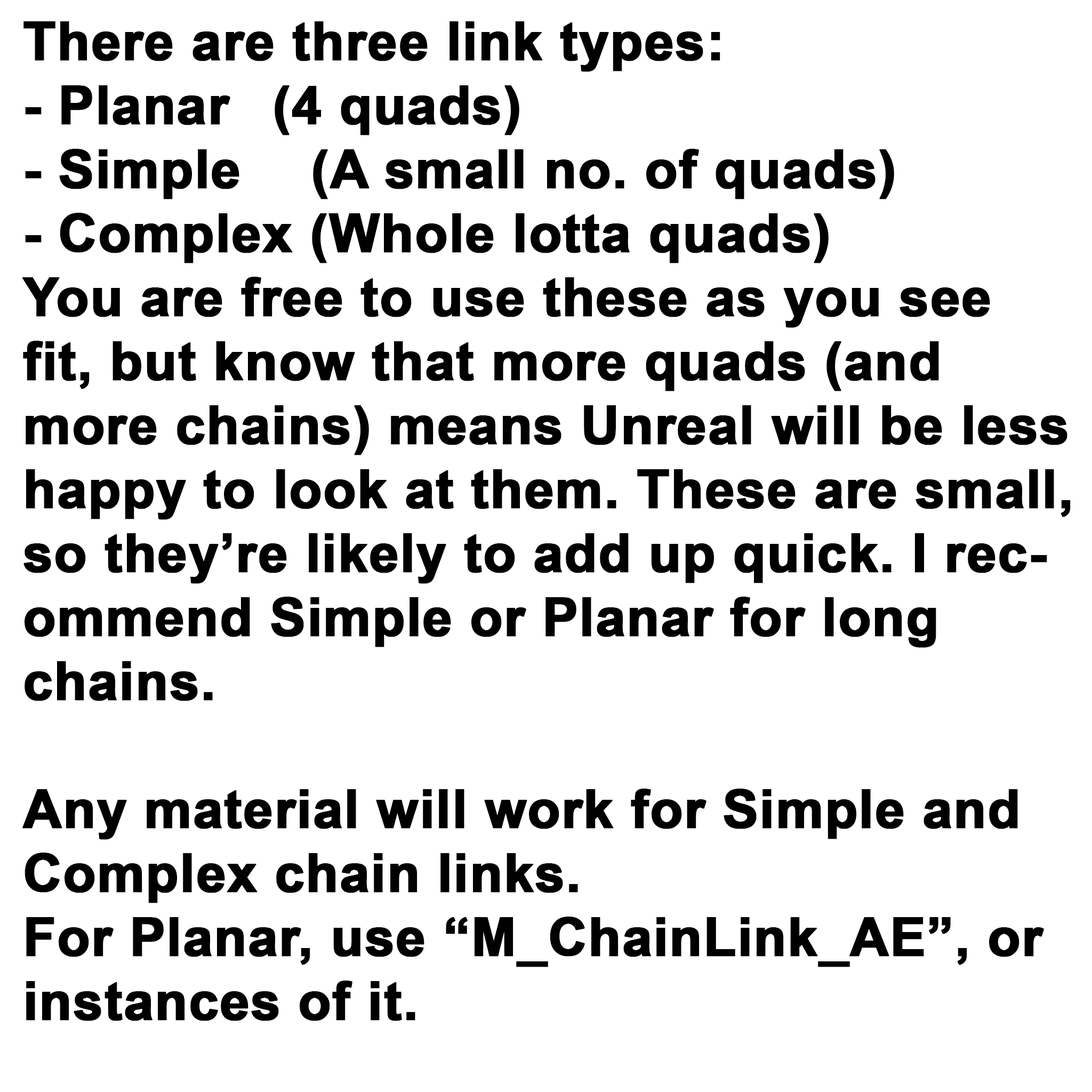
<style>
.page{position:relative;width:1092px;height:1092px;background:#ffffff}
.page>*{position:absolute;margin:0}
.t1{font:53.3px "Arial-BoldMT";color:#000000;font-weight:bold}
</style>
<div class="page">
<p class="t1" style="left:22px;top:21px;width:1049px;height:1000px">There are three link types:<br>- Planar   (4 quads)<br>- Simple    (A small no. of quads)<br>- Complex (Whole lotta quads)<br>You are free to use these as you see fit, but know that more quads (and more chains) means Unreal will be less happy to look at them. These are small, so they’re likely to add up quick. I recommend Simple or Planar for long chains.<br><br>Any material will work for Simple and Complex chain links.<br>For Planar, use “M_ChainLink_AE”, or instances of it.</p>
</div>
